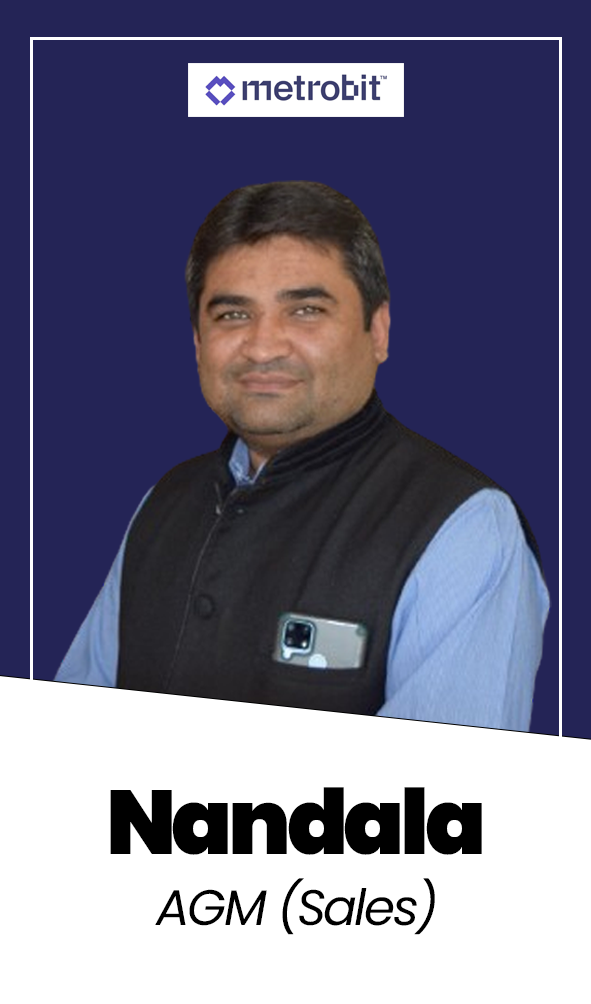
<style>
.page{position:relative;width:591px;height:1004px;background:#242456}
.page>*{position:absolute;margin:0}
.t1{font:90.2px "Poppins-Black";letter-spacing:-0.05em;color:#000000}
.t2{font:50px "Poppins-Italic";letter-spacing:-0.05em;color:#000000}
</style>
<div class="page">
<p class="t1" style="left:110px;top:787px;width:372px;height:68px">Nandala</p>
<p class="t2" style="left:155px;top:878px;width:280px;height:57px">AGM (Sales)</p>
</div>
